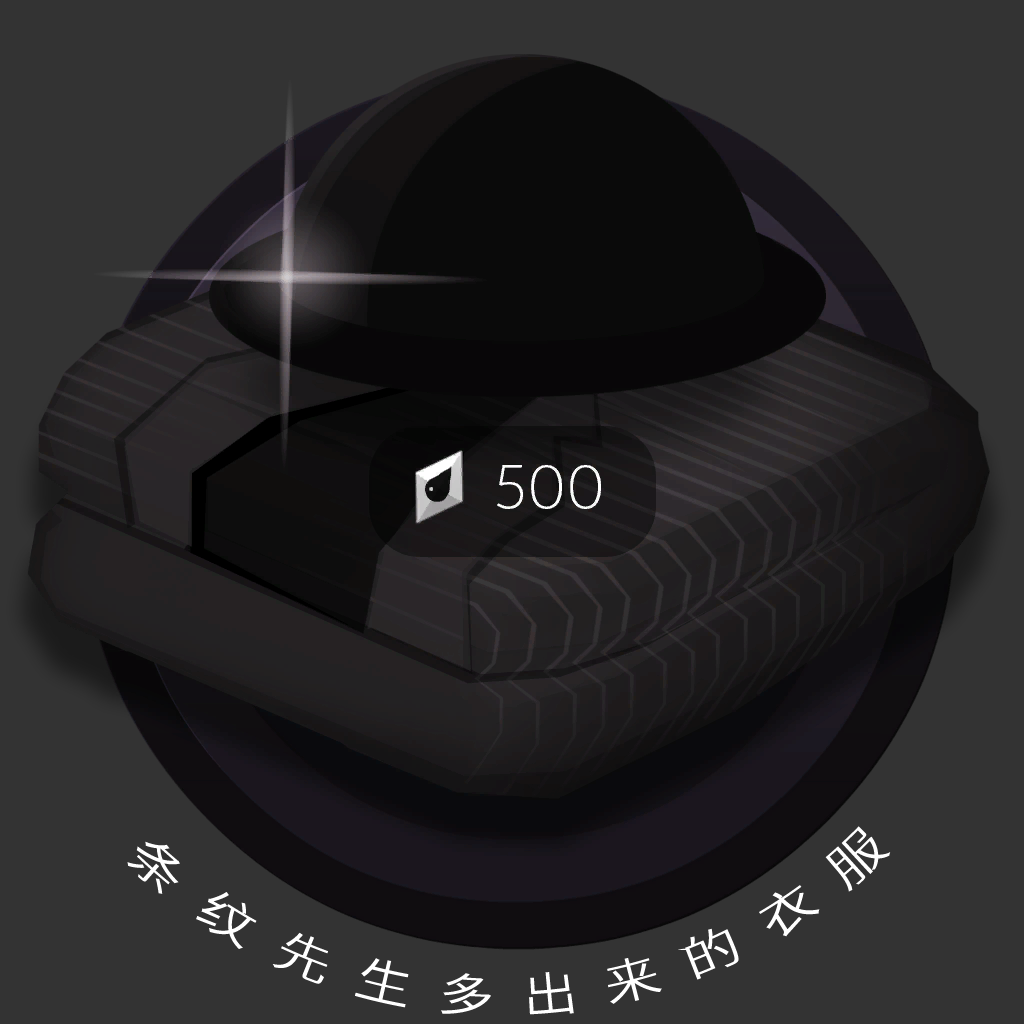
<style>
.page{position:relative;width:1024px;height:1024px;background:#333333}
.page>*{position:absolute;margin:0}
.t1{font:48px/37.3px "SourceHanSansSC-Normal";letter-spacing:0.5em;color:#ffffff}
</style>
<div class="page">
<p class="t1" style="left:127px;top:826px;width:764px;height:189px;text-align:center">条纹先生多出来的衣服</p>
</div>
